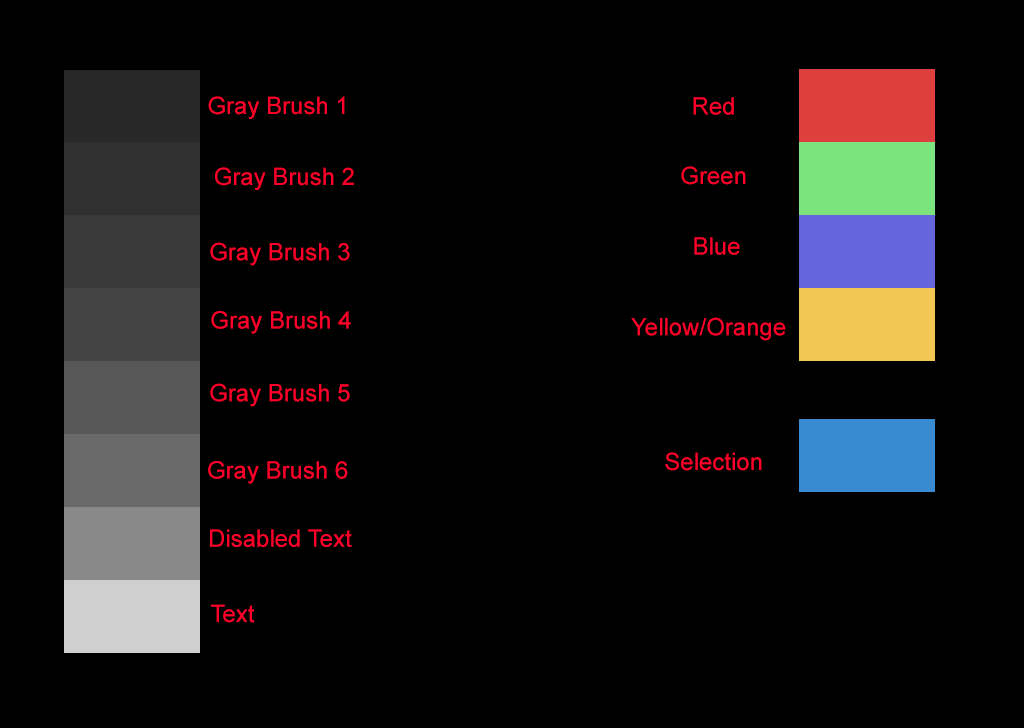
<style>
.page{position:relative;width:1024px;height:728px;background:#000000}
.page>*{position:absolute;margin:0}
.t1{font:24px "ArialMT";color:#ff002a}
</style>
<div class="page">
<p class="t1" style="left:208px;top:96px;width:137px;height:23px">Gray Brush 1</p>
<p class="t1" style="left:693px;top:97px;width:41px;height:18px">Red</p>
<p class="t1" style="left:215px;top:167px;width:139px;height:23px">Gray Brush 2</p>
<p class="t1" style="left:681px;top:166px;width:65px;height:19px">Green</p>
<p class="t1" style="left:210px;top:242px;width:140px;height:24px">Gray Brush 3</p>
<p class="t1" style="left:694px;top:237px;width:46px;height:18px">Blue</p>
<p class="t1" style="left:211px;top:311px;width:140px;height:23px">Gray Brush 4</p>
<p class="t1" style="left:631px;top:317px;width:155px;height:24px">Yellow/Orange</p>
<p class="t1" style="left:210px;top:383px;width:140px;height:24px">Gray Brush 5</p>
<p class="t1" style="left:208px;top:461px;width:140px;height:23px">Gray Brush 6</p>
<p class="t1" style="left:665px;top:452px;width:97px;height:19px">Selection</p>
<p class="t1" style="left:210px;top:529px;width:142px;height:18px">Disabled Text</p>
<p class="t1" style="left:211px;top:604px;width:44px;height:19px">Text</p>
</div>
